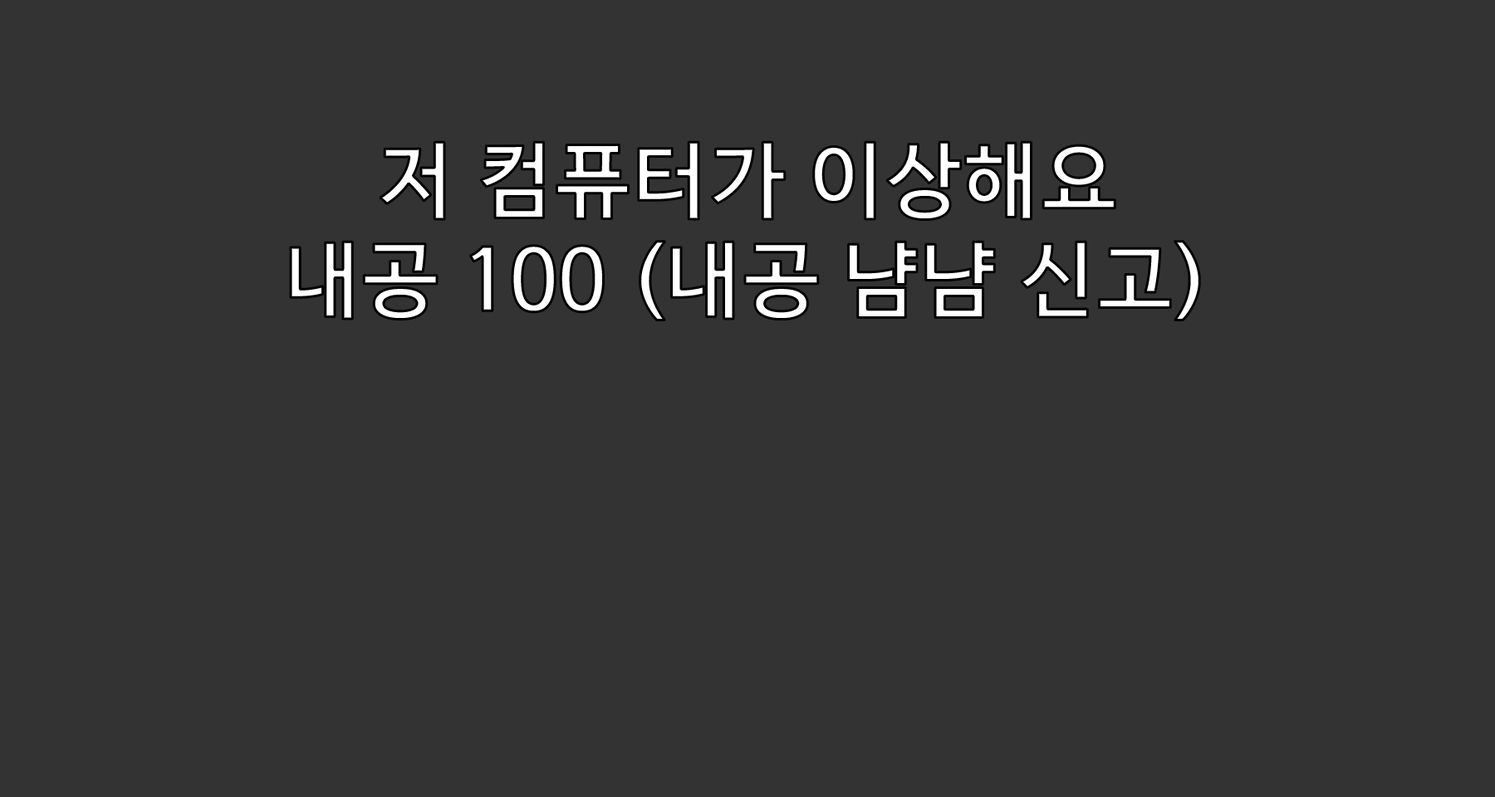
<style>
.page{position:relative;width:1495px;height:797px;background:#333333}
.page>*{position:absolute;margin:0}
.t1{font:83.1px "HancomGothicBold";color:#ffffff}
</style>
<div class="page">
<p class="t1" style="left:291px;top:142px;width:909px;height:179px;text-align:center">저 컴퓨터가 이상해요<br>내공 100 (내공 냠냠 신고)</p>
</div>
